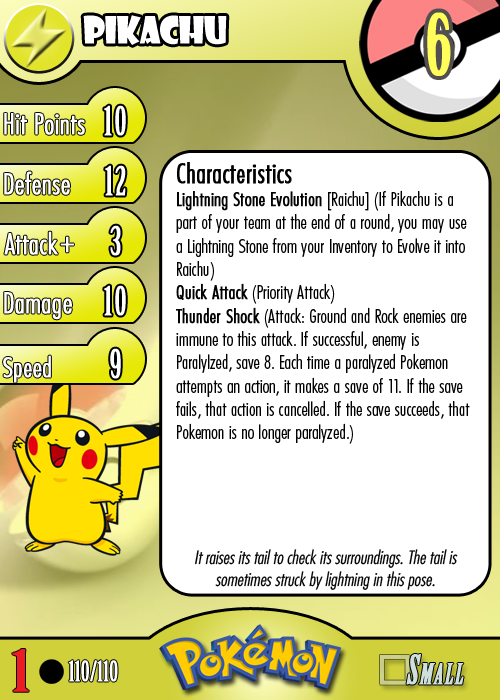
<style>
.page{position:relative;width:500px;height:700px;background:#ffffff}
.page>*{position:absolute;margin:0}
.t1{font:36.7px "ShowcardGothic-Reg";letter-spacing:-0.025em;color:#ffffff;scale:0.91 1}
.t2{font:83.3px "BirchStd";letter-spacing:0.025em;color:#fffd59;font-weight:bold}
.t3{font:27.8px "Futura-CondensedLight";color:#ffffff;font-weight:bold}
.t4{font:38.9px "BirchStd";letter-spacing:0.035em;color:#ffffff;font-weight:bold}
.t5{font:19.4px "FuturaCondensedBQ-Light";color:#010101}
.t6{font:27.8px "FuturaCondensedBQ-Light";color:#010101;font-weight:bold}
.t7{font:19.4px "FuturaCondensedBQ-Light";color:#010101;font-weight:bold}
.t8{font:30.6px "Futura-CondensedLight";color:#ffffff;font-weight:bold}
.t9{font:27.8px "FuturaCondensedBQ-Light";color:#ffffff;font-weight:bold}
.t10{font:18.1px "Futura-CondensedLight";color:#010101;font-style:italic}
.t11{font:55.6px "BirchStd";color:#ed1c24;font-weight:bold;scale:1.5 1}
.t12{font:27.8px "BirchStd";color:#ffffff;font-weight:bold}
</style>
<div class="page">
<p class="t1" style="left:83px;top:15px;width:144px;height:30px">pikachu</p>
<p class="t2" style="left:427px;top:12px;width:24px;height:64px">6</p>
<p class="t3" style="left:4px;top:113px;width:81px;height:22px">Hit Points</p>
<p class="t4" style="left:104px;top:105px;width:22px;height:31px">10</p>
<p class="t3" style="left:4px;top:171px;width:66px;height:24px">Defense</p>
<p class="t4" style="left:105px;top:165px;width:21px;height:31px">12</p>
<p class="t5" style="left:176px;top:162px;width:294px;height:282px"><span class="t6">Characteristics<br></span><span class="t7">Lightning Stone Evolution </span>[Raichu] (If Pikachu is a part of your team at the end of a round, you may use a Lightning Stone from your Inventory to Evolve it into Raichu)<br><span class="t7">Quick Attack</span> (Priority Attack)<br><span class="t7">Thunder Shock</span> (Attack: Ground and Rock enemies are immune to this attack. If successful, enemy is Paralylzed, save 8. Each time a paralyzed Pokemon attempts an action, it makes a save of 11. If the save fails, that action is cancelled. If the save succeeds, that Pokemon is no longer paralyzed.)</p>
<p class="t3" style="left:4px;top:231px;width:54px;height:24px">Attack</p>
<p class="t4" style="left:110px;top:225px;width:11px;height:31px">3</p>
<p class="t8" style="left:60px;top:236px;width:14px;height:17px">+</p>
<p class="t3" style="left:4px;top:292px;width:68px;height:28px">Damage</p>
<p class="t4" style="left:104px;top:285px;width:22px;height:31px">10</p>
<p class="t4" style="left:110px;top:348px;width:11px;height:31px">9</p>
<p class="t9" style="left:3px;top:355px;width:48px;height:28px">Speed</p>
<p class="t10" style="left:195px;top:549px;width:263px;height:41px;text-align:center">It raises its tail to check its surroundings. The tail is sometimes struck by lightning in this pose.</p>
<p class="t11" style="left:12px;top:649px;width:17px;height:43px">1</p>
<p class="t12" style="left:68px;top:660px;width:50px;height:22px">110/110</p>
</div>
